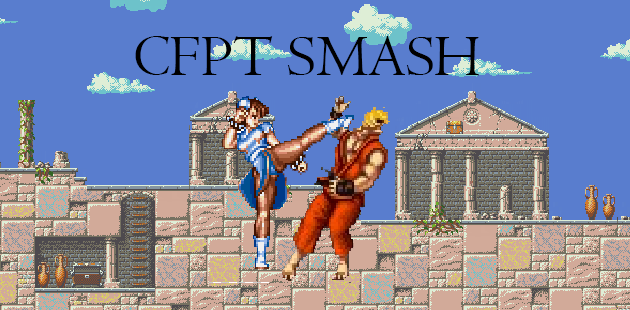
<style>
.page{position:relative;width:630px;height:310px;background:#597dce}
.page>*{position:absolute;margin:0}
.t1{font:60px "Centaur";color:#000000}
</style>
<div class="page">
<p class="t1" style="left:135px;top:36px;width:344px;height:40px">CFPT SMASH</p>
</div>
